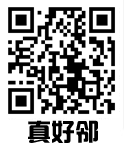
<style>
.page{position:relative;width:124px;height:149px;background:#ffffff}
.page>*{position:absolute;margin:0}
.t1{font:24px "¹ã½Ý¾ÓÃÔÄã×Ö¿â";color:#000000}
</style>
<div class="page">
<p class="t1" style="left:28px;top:120px;width:70px;height:23px">真好邻</p>
</div>
